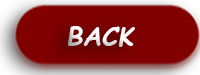
<style>
.page{position:relative;width:200px;height:75px;background:#800000}
.page>*{position:absolute;margin:0}
.t1{font:25.7px "ComicSansMS-BoldItalic";letter-spacing:0.01em;color:#ffffff}
</style>
<div class="page">
<p class="t1" style="left:68px;top:26px;width:67px;height:21px">BACK</p>
</div>
